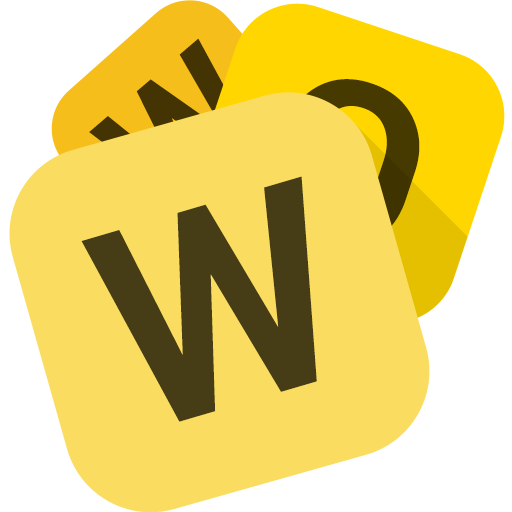
<style>
.page{position:relative;width:512px;height:512px;background:#fadd60}
.page>*{position:absolute;margin:0}
.t1{font:176.6px "Roboto-Bold";letter-spacing:-0.2em}
.t2{font:231.8px "Roboto-Bold";letter-spacing:-0.2em}
.t3{font:282px "Roboto-Bold";letter-spacing:-0.2em;color:#463c15}
</style>
<div class="page">
<p class="t1" style="left:89px;top:38px;width:171px;height:173px;rotate:-41deg">W</p>
<p class="t2" style="left:270px;top:79px;width:150px;height:170px;rotate:18deg">O</p>
<p class="t3" style="left:81px;top:176px;width:236px;height:246px;rotate:-16deg">W</p>
</div>
